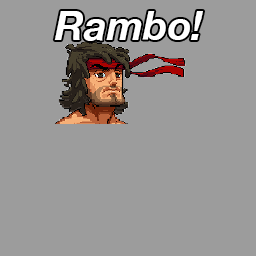
<style>
.page{position:relative;width:256px;height:256px;background:#9c9c9c}
.page>*{position:absolute;margin:0}
.t1{font:40px "HelveticaNeue-BoldItalic";color:#ffffff}
</style>
<div class="page">
<p class="t1" style="left:54px;top:11px;width:149px;height:30px">Rambo!</p>
</div>
